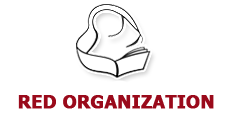
<style>
.page{position:relative;width:232px;height:125px;background:#ffffff}
.page>*{position:absolute;margin:0}
.t1{font:18px "Tahoma-Bold";color:#9a0a1b;font-weight:bold}
</style>
<div class="page">
<p class="t1" style="left:18px;top:95px;width:196px;height:14px">RED ORGANIZATION</p>
</div>
